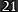
<style>
.page{position:relative;width:18px;height:12px;background:#333333}
.page>*{position:absolute;margin:0}
.t1{font:17px "Perpetua-Bold";color:#ffffff}
</style>
<div class="page">
<p class="t1" style="left:2px;top:1px;width:14px;height:10px">21</p>
</div>
